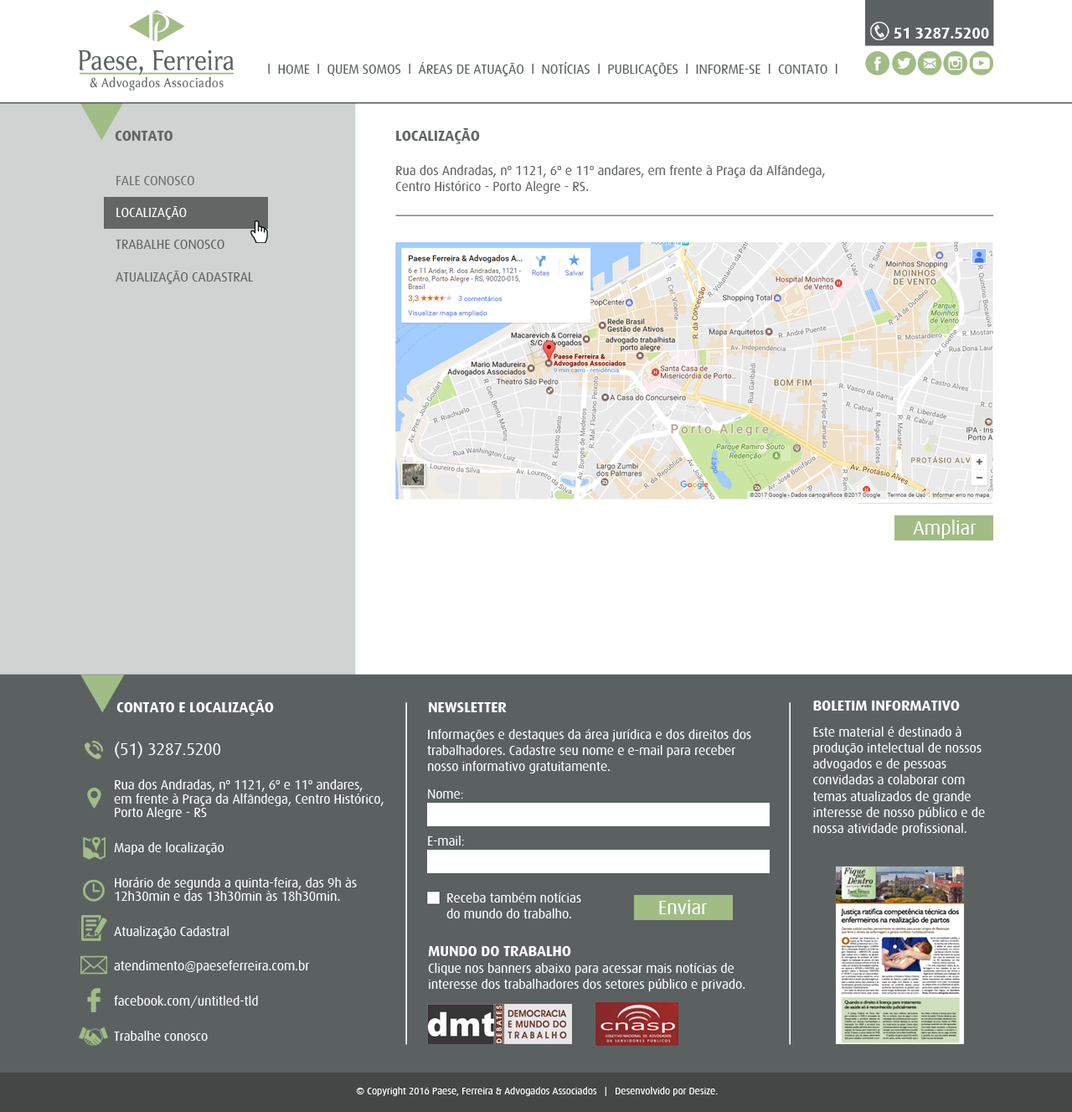
<style>
.page{position:relative;width:1072px;height:1112px;background:#ffffff}
.page>*{position:absolute;margin:0}
.t1{font:15.8px "Dax-Bold";letter-spacing:-0.01em;color:#ffffff}
.t2{font:13.4px "Dax-Regular";letter-spacing:-0.01em;color:#5b6161}
.t3{font:12.3px "ArialMT";letter-spacing:-0.01em;color:#000000}
.t4{font:15.1px "Dax-Bold";letter-spacing:-0.01em;color:#626665}
.t5{font:13.4px "Dax-Regular";letter-spacing:-0.01em;color:#626665}
.t6{font:19.9px "Dax-Regular";letter-spacing:-0.01em;color:#ffffff}
.t7{font:15.1px "Dax-Bold";letter-spacing:-0.01em;color:#ffffff}
.t8{font:13.4px "Dax-Regular";letter-spacing:-0.01em;color:#ffffff}
.t9{font:13.4px/13.9px "Dax-Regular";letter-spacing:-0.01em;color:#ffffff}
.t10{font:16.8px/13.9px "Dax-Regular";letter-spacing:-0.01em;color:#ffffff}
.t11{font:10.1px "Dax-Regular";letter-spacing:-0.01em;color:#ffffff}
</style>
<div class="page">
<p class="t1" style="left:894px;top:28px;width:96px;height:11px">51 3287.5200</p>
<p class="t2" style="left:268px;top:62px;width:570px;height:14px"><span class="t3"><br></span>l  HOME  l  QUEM SOMOS  l  ÁREAS DE ATUAÇÃO  l  NOTÍCIAS  l  PUBLICAÇÕES  l  INFORME-SE  l  CONTATO  l</p>
<p class="t4" style="left:115px;top:131px;width:58px;height:10px">CONTATO</p>
<p class="t5" style="left:395px;top:128px;width:430px;height:66px"><span class="t4">LOCALIZAÇÃO<br><br></span>Rua dos Andradas, nº 1121, 6º e 11º andares, em frente à Praça da Alfândega, Centro Histórico - Porto Alegre - RS.</p>
<p class="t6" style="left:913px;top:519px;width:64px;height:20px">Ampliar</p>
<p class="t7" style="left:116px;top:700px;width:158px;height:16px">CONTATO E LOCALIZAÇÃO</p>
<p class="t8" style="left:814px;top:700px;width:171px;height:135px"><span class="t7">BOLETIM INFORMATIVO<br><br></span>Este material é destinado à produção intelectual de nossos advogados e de pessoas convidadas a colaborar com temas atualizados de grande interesse de nosso público e de nossa atividade profissional.</p>
<p class="t7" style="left:429px;top:702px;width:78px;height:10px">NEWSLETTER</p>
<p class="t8" style="left:427px;top:729px;width:325px;height:44px">Informações e destaques da área jurídica e dos direitos dos trabalhadores. Cadastre seu nome e e-mail para receber nosso informativo gratuitamente.</p>
<p class="t9" style="left:114px;top:742px;width:270px;height:299px"><span class="t10">(51) 3287.5200<br><br></span>Rua dos Andradas, nº 1121, 6º e 11º andares, <br>em frente à Praça da Alfândega, Centro Histórico, Porto Alegre - RS<br><br>Mapa de localização<br><br>Horário de segunda a quinta-feira, das 9h às 12h30min e das 13h30min às 18h30min.<br><br>Atualização Cadastral<br><br>atendimento@paeseferreira.com.br<br><br>facebook.com/untitled-tld<br><br>Trabalhe conosco</p>
<p class="t8" style="left:428px;top:789px;width:35px;height:9px">Nome:</p>
<p class="t8" style="left:428px;top:835px;width:36px;height:10px">E-mail:</p>
<p class="t8" style="left:447px;top:892px;width:134px;height:26px">Receba também notícias<br>do mundo do trabalho.</p>
<p class="t6" style="left:659px;top:900px;width:49px;height:14px">Enviar</p>
<p class="t8" style="left:428px;top:946px;width:318px;height:45px"><span class="t7">MUNDO DO TRABALHO <br></span>Clique nos banners abaixo para acessar mais notícias de <br>interesse dos trabalhadores dos setores público e privado.</p>
<p class="t11" style="left:356px;top:1087px;width:362px;height:9px">© Copyright 2016 Paese, Ferreira &amp; Advogados Associados   |   Desenvolvido por Desize.</p>
</div>
